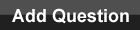
<style>
.page{position:relative;width:140px;height:30px;background:#4f4f4f}
.page>*{position:absolute;margin:0}
.t1{font:18px "Arial-BoldMT";color:#ffffff}
</style>
<div class="page">
<p class="t1" style="left:12px;top:8px;width:117px;height:16px">Add Question</p>
</div>
